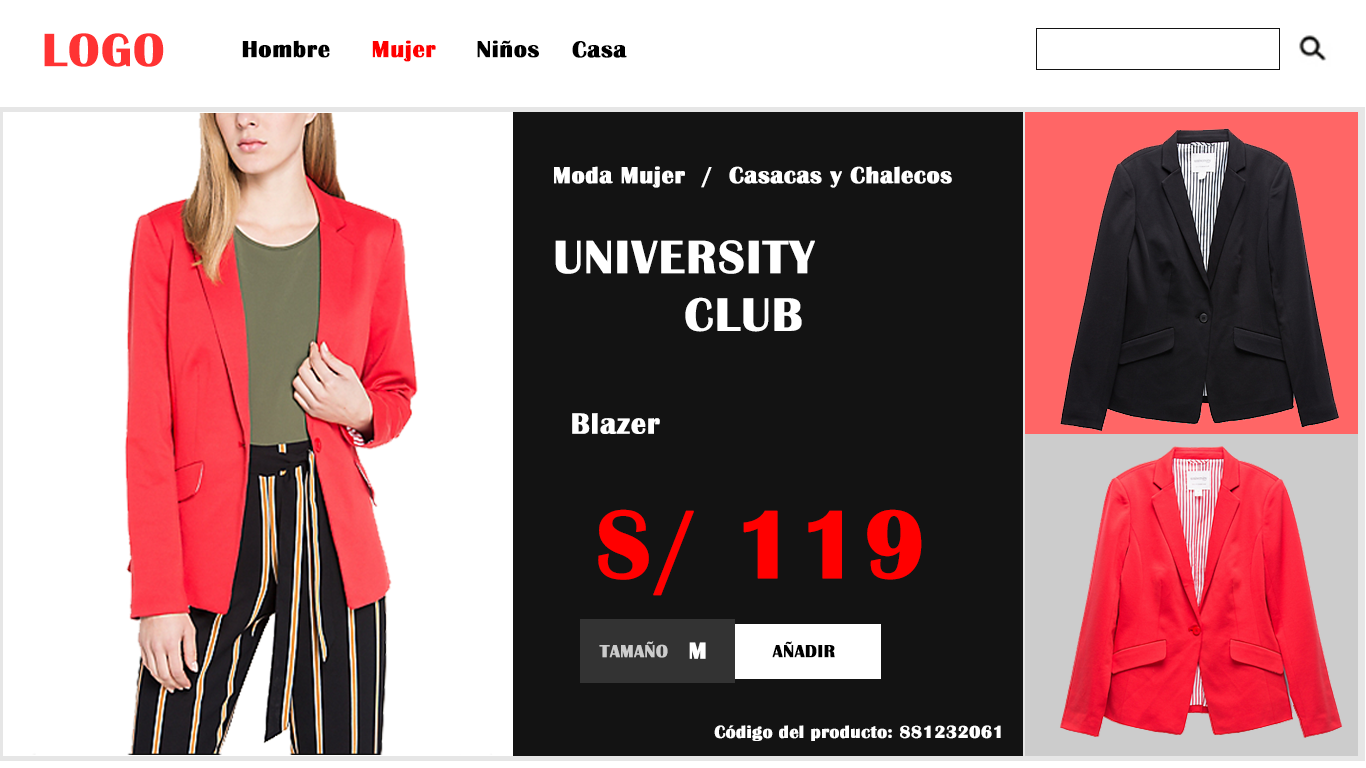
<style>
.page{position:relative;width:1366px;height:768px;background:#ffffff}
.page>*{position:absolute;margin:0}
.t1{font:48px "BritannicBold";letter-spacing:0.01em;color:#ff3333;font-weight:bold}
.t2{font:24px "BritannicBold";letter-spacing:0.01em;color:#000000;font-weight:bold}
.t3{font:24px "BritannicBold";letter-spacing:0.01em;color:#ff0000;font-weight:bold}
.t4{font:24px "BritannicBold";letter-spacing:0.01em;color:#ffffff;font-weight:bold}
.t5{font:48px "BritannicBold";letter-spacing:0.01em;color:#ffffff;font-weight:bold}
.t6{font:30px "BritannicBold";letter-spacing:0.01em;color:#ffffff;font-weight:bold}
.t7{font:100px "BritannicBold";letter-spacing:0.01em;color:#ff0000;font-weight:bold}
.t8{font:18px "BritannicBold";letter-spacing:0.01em;color:#cccccc;font-weight:bold}
.t9{font:18px "BritannicBold";letter-spacing:0.01em;color:#000000;font-weight:bold}
.t10{font:18px "BritannicBold";letter-spacing:0.01em;color:#ffffff;font-weight:bold}
</style>
<div class="page">
<p class="t1" style="left:44px;top:33px;width:120px;height:34px">LOGO</p>
<p class="t2" style="left:242px;top:40px;width:88px;height:18px">Hombre</p>
<p class="t3" style="left:372px;top:40px;width:64px;height:22px">Mujer</p>
<p class="t2" style="left:477px;top:40px;width:62px;height:18px">Niños</p>
<p class="t2" style="left:572px;top:41px;width:55px;height:17px">Casa</p>
<p class="t4" style="left:554px;top:166px;width:398px;height:22px">Moda Mujer  /  Casacas y Chalecos</p>
<p class="t5" style="left:555px;top:240px;width:260px;height:92px;text-align:center">UNIVERSITY<br>CLUB</p>
<p class="t6" style="left:572px;top:413px;width:88px;height:21px">Blazer</p>
<p class="t7" style="left:598px;top:509px;width:324px;height:87px">S/ 119</p>
<p class="t8" style="left:599px;top:641px;width:69px;height:17px">TAMAÑO</p>
<p class="t9" style="left:772px;top:641px;width:63px;height:17px">AÑADIR</p>
<p class="t4" style="left:689px;top:642px;width:17px;height:17px">M</p>
<p class="t10" style="left:714px;top:725px;width:287px;height:16px">Código del producto: 881232061</p>
</div>
